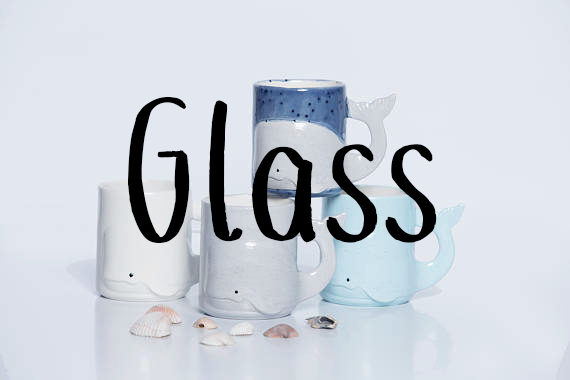
<style>
.page{position:relative;width:570px;height:380px;background:#e3e7ef}
.page>*{position:absolute;margin:0}
.t1{font:200px "coffee+teademo-Regular";color:#000000}
</style>
<div class="page">
<p class="t1" style="left:128px;top:96px;width:309px;height:147px">Glass</p>
</div>
